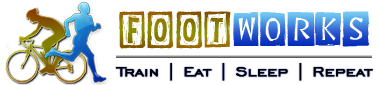
<style>
.page{position:relative;width:381px;height:85px;background:#ffffff}
.page>*{position:absolute;margin:0}
.t1{font:37px "DigitalWoodcutsOpenITCTT"}
.t2{font:37px "DigitalWoodcutsBlackITCTT"}
.t3{font:17.6px "EngraversGothicBT-Regular";color:#000000;font-weight:bold;scale:1.1 1}
</style>
<div class="page">
<p class="t1" style="left:119px;top:11px;width:112px;height:38px">FOOT</p>
<p class="t2" style="left:233px;top:11px;width:137px;height:36px">WORKS</p>
<p class="t3" style="left:115px;top:63px;width:258px;height:18px">Train | Eat | Sleep | Repeat</p>
</div>
